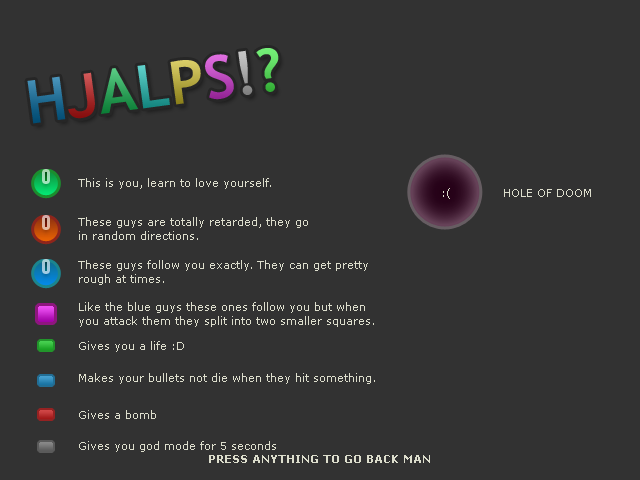
<style>
.page{position:relative;width:640px;height:480px;background:#323232}
.page>*{position:absolute;margin:0}
.t1{font:60px "TrebuchetMS-Bold"}
.t2{font:11px "Verdana";color:#dddecd}
.t3{font:11px "Verdana-Bold";color:#dddecd}
</style>
<div class="page">
<p class="t1" style="left:27px;top:48px;width:252px;height:76px;rotate:-8deg">HJALPS!?</p>
<p class="t2" style="left:78px;top:178px;width:193px;height:11px">This is you, learn to love yourself.</p>
<p class="t2" style="left:443px;top:188px;width:7px;height:11px">:(</p>
<p class="t2" style="left:504px;top:189px;width:87px;height:8px">HOLE OF DOOM</p>
<p class="t2" style="left:78px;top:217px;width:230px;height:23px">These guys are totally retarded, they go in random directions.</p>
<p class="t2" style="left:78px;top:260px;width:290px;height:25px">These guys follow you exactly. They can get pretty rough at times.</p>
<p class="t2" style="left:79px;top:302px;width:295px;height:25px">Like the blue guys these ones follow you but when you attack them they split into two smaller squares.</p>
<p class="t2" style="left:79px;top:341px;width:105px;height:11px">Gives you a life :D</p>
<p class="t2" style="left:79px;top:373px;width:296px;height:11px">Makes your bullets not die when they hit something.</p>
<p class="t2" style="left:79px;top:410px;width:77px;height:9px">Gives a bomb</p>
<p class="t2" style="left:79px;top:441px;width:197px;height:11px">Gives you god mode for 5 seconds</p>
<p class="t3" style="left:209px;top:455px;width:221px;height:8px">PRESS ANYTHING TO GO BACK MAN</p>
</div>
